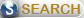
<style>
.page{position:relative;width:84px;height:18px}
.page>*{position:absolute;margin:0}
.t1{font:16px "SimSun";color:#ffffff;font-weight:bold}
.t2{font:14px "ArialRoundedMTBold";color:#ab8725}
</style>
<div class="page">
<p class="t1" style="left:6px;top:3px;width:8px;height:12px">S</p>
<p class="t2" style="left:21px;top:4px;width:59px;height:10px">SEARCH</p>
</div>
